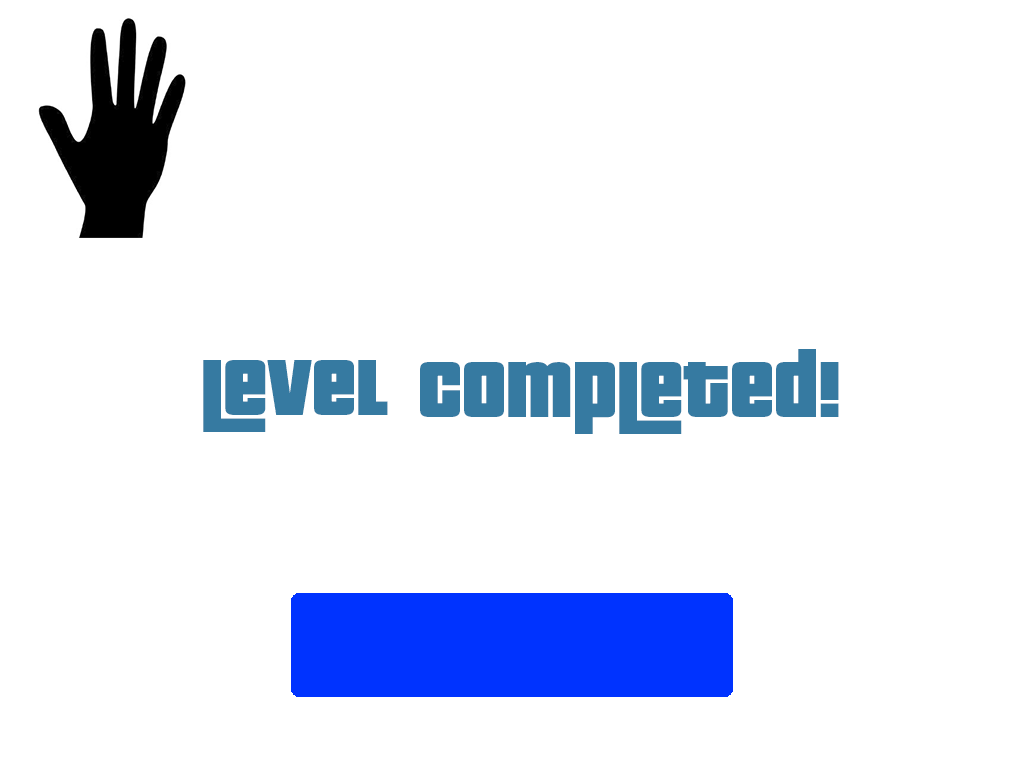
<style>
.page{position:relative;width:1024px;height:768px;background:#ffffff}
.page>*{position:absolute;margin:0}
.t1{font:85.6px "PricedownBl-Regular";color:#367aa1}
</style>
<div class="page">
<p class="t1" style="left:420px;top:349px;width:419px;height:85px">Completed!</p>
<p class="t1" style="left:203px;top:360px;width:185px;height:72px">Level</p>
</div>
